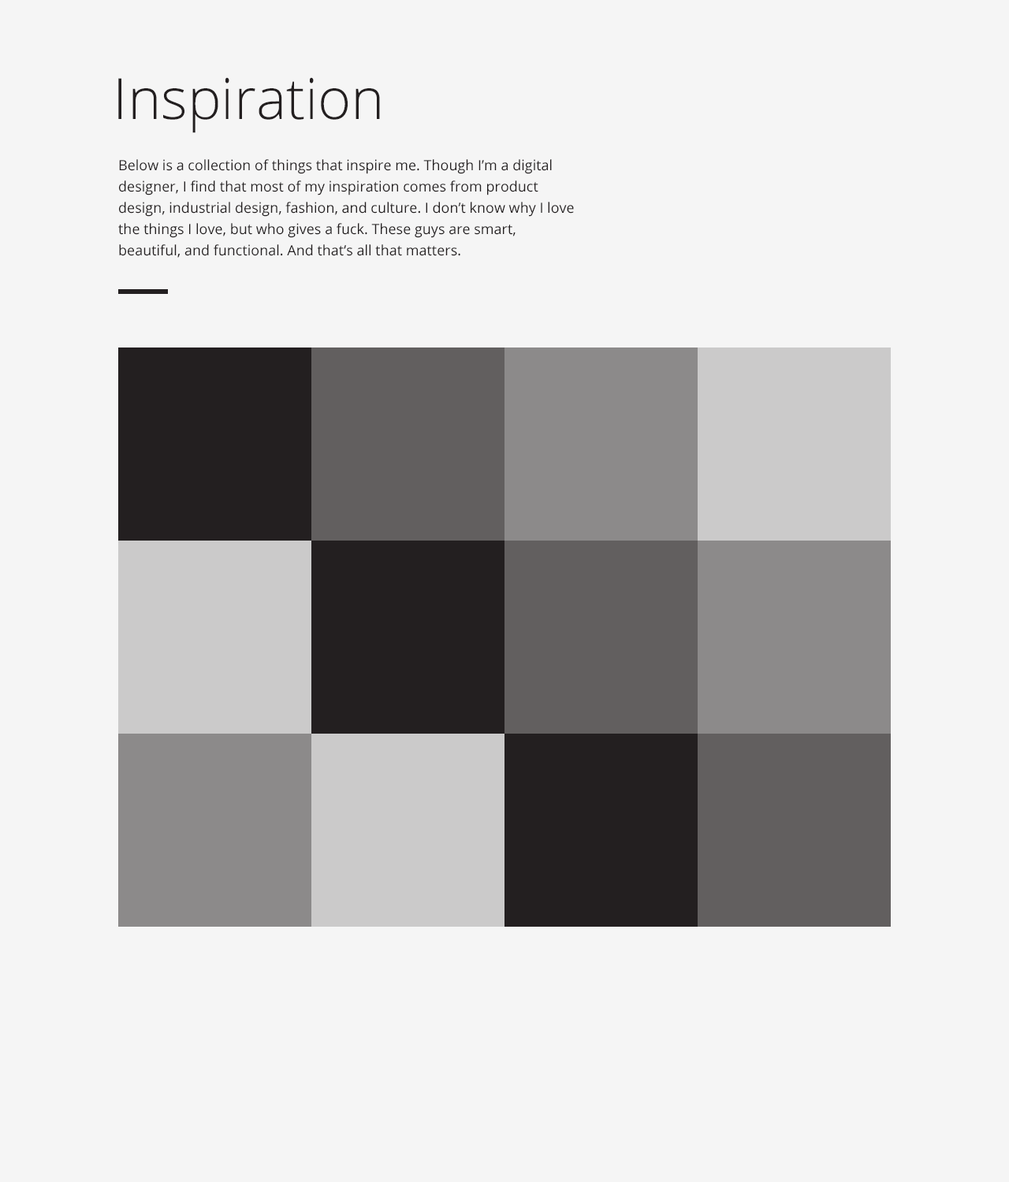
<style>
.page{position:relative;width:1009px;height:1182px;background:#f5f5f5}
.page>*{position:absolute;margin:0}
.t1{font:56.7px "OpenSans-Light";color:#231f20}
.t2{font:14.2px/21.3px "OpenSans";color:#231f20}
</style>
<div class="page">
<p class="t1" style="left:118px;top:77px;width:262px;height:56px">Inspiration</p>
<p class="t2" style="left:118px;top:159px;width:456px;height:99px">Below is a collection of things that inspire me. Though I’m a digital designer, I find that most of my inspiration comes from product design, industrial design, fashion, and culture. I don’t know why I love the things I love, but who gives a fuck. These guys are smart, beautiful, and functional. And that’s all that matters.</p>
</div>
